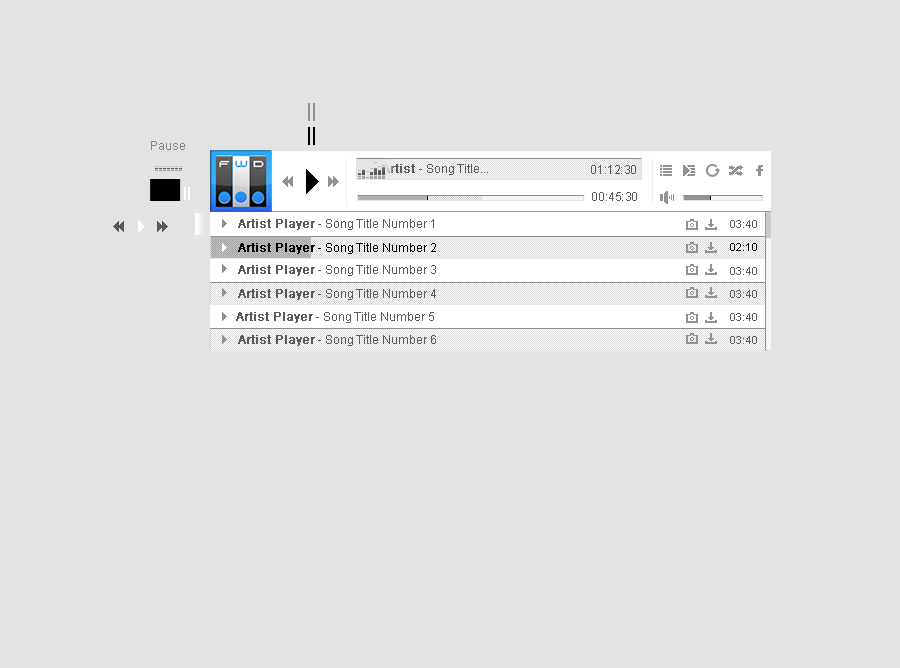
<style>
.page{position:relative;width:900px;height:668px;background:#e3e3e3}
.page>*{position:absolute;margin:0}
.t1{font:12px "ArialMT";color:#838383}
.t2{font:12px "ArialMT";color:#5a5a5a}
.t3{font:12px "ArialMT";color:#5a5a5a;font-weight:bold}
.t4{font:11px "ArialMT";color:#5a5a5a}
.t5{font:12px "ArialMT";color:#000000}
.t6{font:12px "ArialMT";color:#000000;font-weight:bold}
.t7{font:11px "ArialMT";color:#000000}
</style>
<div class="page">
<p class="t1" style="left:151px;top:141px;width:34px;height:9px">Pause</p>
<p class="t2" style="left:382px;top:164px;width:106px;height:11px"><span class="t3">Artist </span>- Song Title...</p>
<p class="t2" style="left:591px;top:165px;width:45px;height:9px">01:12:30</p>
<p class="t2" style="left:592px;top:192px;width:45px;height:9px">00:45:30</p>
<p class="t2" style="left:238px;top:219px;width:196px;height:11px"><span class="t3">Artist Player</span> - Song Title Number 1</p>
<p class="t4" style="left:730px;top:220px;width:27px;height:8px">03:40</p>
<p class="t5" style="left:238px;top:243px;width:198px;height:11px"><span class="t6">Artist Player</span> - Song Title Number 2</p>
<p class="t7" style="left:730px;top:243px;width:27px;height:8px">02:10</p>
<p class="t2" style="left:238px;top:265px;width:198px;height:11px"><span class="t3">Artist Player</span> - Song Title Number 3</p>
<p class="t4" style="left:730px;top:267px;width:27px;height:8px">03:40</p>
<p class="t2" style="left:238px;top:289px;width:198px;height:11px"><span class="t3">Artist Player</span> - Song Title Number 4</p>
<p class="t4" style="left:730px;top:290px;width:27px;height:8px">03:40</p>
<p class="t2" style="left:236px;top:312px;width:198px;height:11px"><span class="t3">Artist Player</span> - Song Title Number 5</p>
<p class="t4" style="left:730px;top:313px;width:27px;height:8px">03:40</p>
<p class="t2" style="left:238px;top:335px;width:198px;height:11px"><span class="t3">Artist Player</span> - Song Title Number 6</p>
<p class="t4" style="left:730px;top:336px;width:27px;height:8px">03:40</p>
</div>
